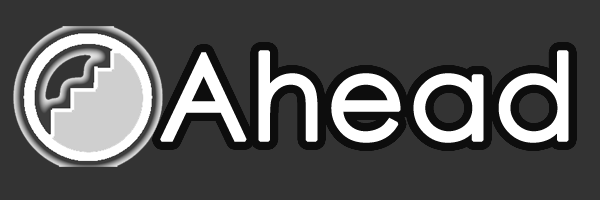
<style>
.page{position:relative;width:600px;height:200px;background:#333333}
.page>*{position:absolute;margin:0}
.t1{font:120px "CenturyGothic";color:#ffffff;font-weight:bold}
</style>
<div class="page">
<p class="t1" style="left:160px;top:50px;width:409px;height:93px">Ahead</p>
</div>
